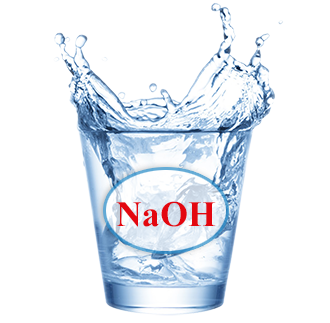
<style>
.page{position:relative;width:330px;height:323px;background:#ffffff}
.page>*{position:absolute;margin:0}
.t1{font:36px "TimesNewRomanPS-BoldMT";color:#e30710}
</style>
<div class="page">
<p class="t1" style="left:116px;top:201px;width:100px;height:26px">NaOH</p>
</div>
